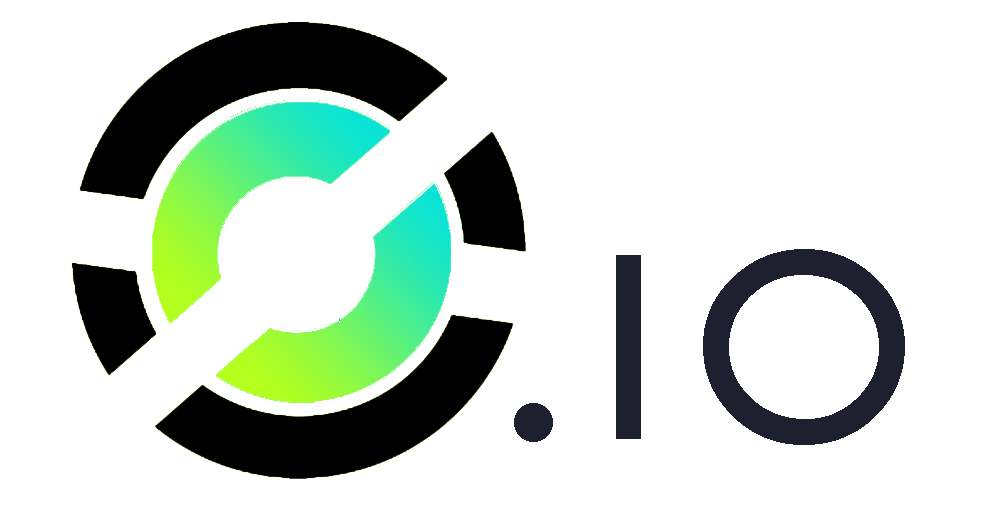
<style>
.page{position:relative;width:1000px;height:508px;background:#ffffff}
.page>*{position:absolute;margin:0}
.t1{font:296px "TwCenMT-Regular";letter-spacing:0.1em;color:#1e2030}
</style>
<div class="page">
<p class="t1" style="left:514px;top:249px;width:391px;height:196px">.IO</p>
</div>
